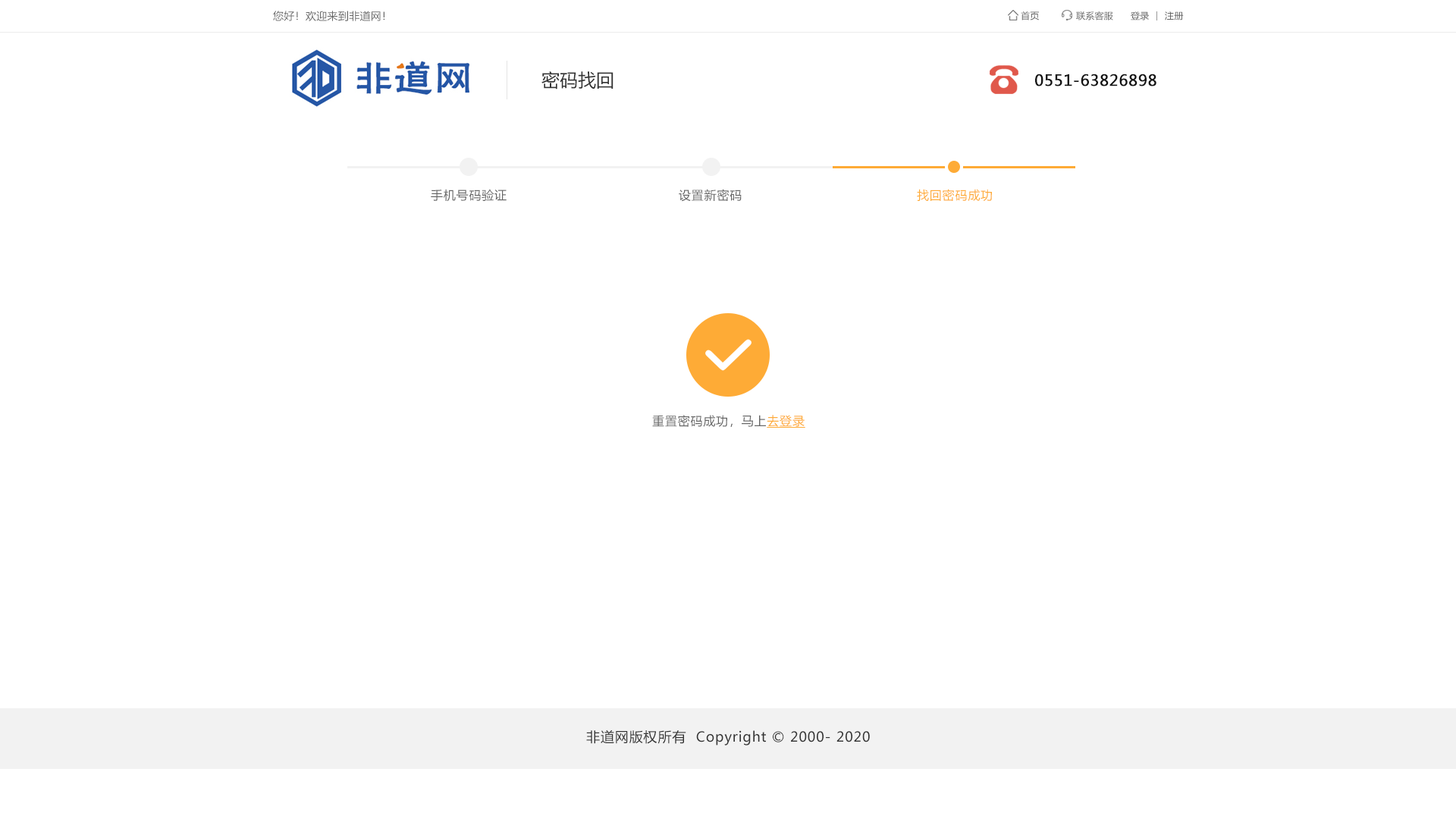
<style>
.page{position:relative;width:1456px;height:819px;background:#ffffff}
.page>*{position:absolute;margin:0}
.t1{font:10.6px "MicrosoftYaHei";letter-spacing:0.022em;color:#666666}
.t2{font:9.1px "MicrosoftYaHei";letter-spacing:0.022em;color:#666666}
.t3{font:18.2px "MicrosoftYaHei";color:#333333}
.t4{font:15.2px "MicrosoftYaHei";letter-spacing:0.022em;color:#121212;font-weight:bold}
.t5{font:12.1px "MicrosoftYaHei";letter-spacing:0.05em;color:#666666}
.t6{font:12.1px "MicrosoftYaHei";letter-spacing:0.05em;color:#feab36}
.t7{font:12.1px "MicrosoftYaHei";letter-spacing:0.05em;color:#feab36;text-decoration:underline}
.t8{font:13.6px "MicrosoftYaHei";letter-spacing:0.05em;color:#333333}
</style>
<div class="page">
<p class="t1" style="left:273px;top:11px;width:112px;height:10px">您好！欢迎来到非道网！</p>
<p class="t2" style="left:1021px;top:11px;width:18px;height:9px">首页</p>
<p class="t2" style="left:1076px;top:11px;width:37px;height:9px">联系客服</p>
<p class="t2" style="left:1131px;top:11px;width:18px;height:9px">登录</p>
<p class="t2" style="left:1165px;top:11px;width:19px;height:9px">注册</p>
<p class="t3" style="left:541px;top:71px;width:72px;height:18px">密码找回</p>
<p class="t4" style="left:1035px;top:74px;width:121px;height:12px">0551-63826898</p>
<p class="t5" style="left:431px;top:189px;width:76px;height:13px">手机号码验证</p>
<p class="t5" style="left:679px;top:189px;width:63px;height:13px">设置新密码</p>
<p class="t6" style="left:917px;top:189px;width:75px;height:12px">找回密码成功</p>
<p class="t5" style="left:652px;top:415px;width:153px;height:13px">重置密码成功，马上<span class="t7">去登录</span></p>
<p class="t8" style="left:586px;top:730px;width:284px;height:15px">非道网版权所有  Copyright © 2000- 2020</p>
</div>
